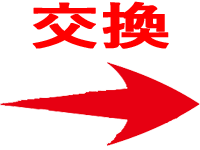
<style>
.page{position:relative;width:200px;height:150px;background:#ffffff}
.page>*{position:absolute;margin:0}
.t1{font:50px "YuGothic-Bold";color:#ff0000;font-weight:bold;scale:1.38 1}
</style>
<div class="page">
<p class="t1" style="left:32px;top:1px;width:137px;height:48px">交換</p>
</div>
